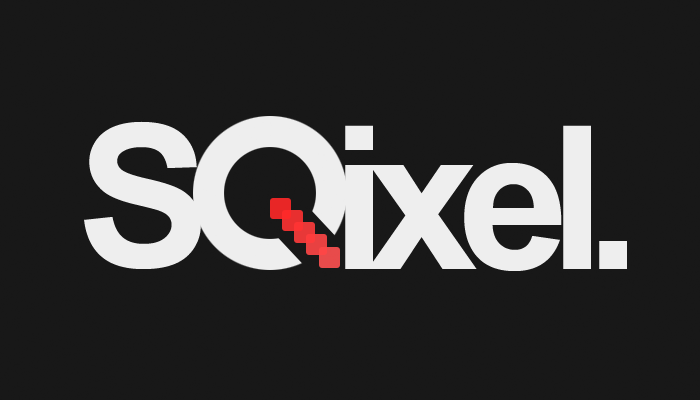
<style>
.page{position:relative;width:700px;height:400px;background:#181818}
.page>*{position:absolute;margin:0}
.t1{font:200px "Arial-BoldMT";letter-spacing:-0.1em;color:#eeeeee}
</style>
<div class="page">
<p class="t1" style="left:84px;top:121px;width:117px;height:148px">S</p>
<p class="t1" style="left:345px;top:125px;width:282px;height:146px">ixel.</p>
</div>
